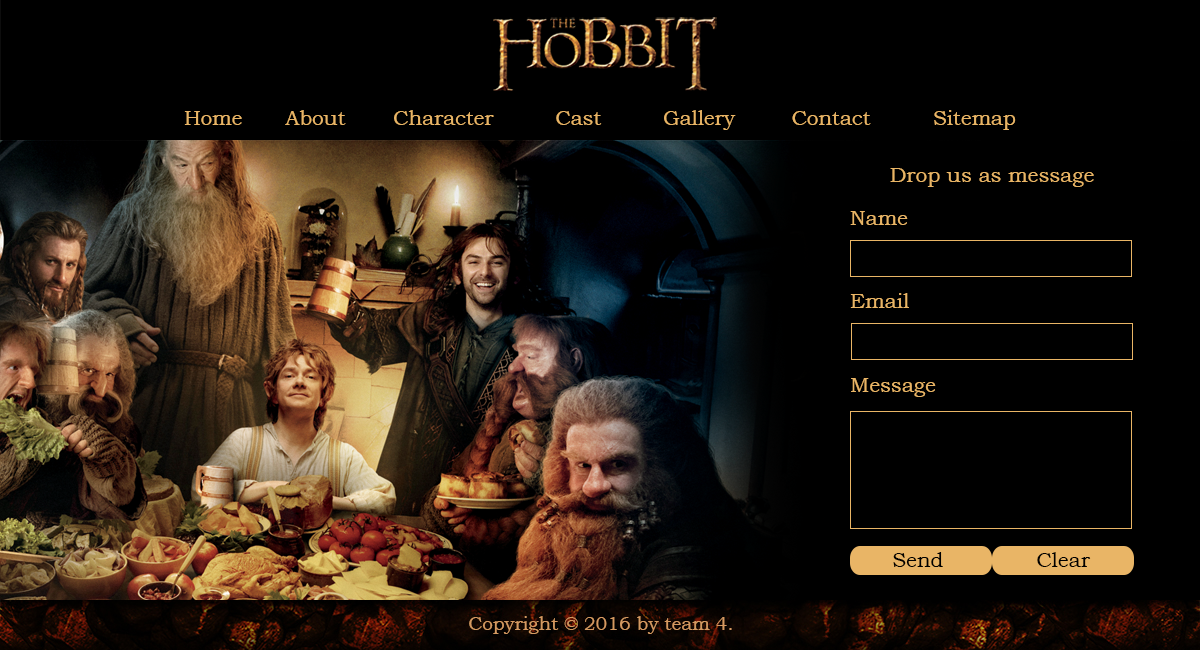
<style>
.page{position:relative;width:1200px;height:650px;background:#000000}
.page>*{position:absolute;margin:0}
.t1{font:20.6px "BookmanOldStyle";color:#e9b566}
.t2{font:20.8px "BookmanOldStyle";color:#e9b566}
.t3{font:20.8px/41.7px "BookmanOldStyle";color:#e9b566}
.t4{font:20.8px "BookmanOldStyle";color:#000000}
</style>
<div class="page">
<p class="t1" style="left:184px;top:110px;width:832px;height:20px">Home   About   Character   Cast   Gallery   Contact   Sitemap</p>
<p class="t2" style="left:890px;top:168px;width:204px;height:19px">Drop us as message</p>
<p class="t3" style="left:850px;top:211px;width:86px;height:186px">Name<br><br>Email<br><br>Message</p>
<p class="t4" style="left:893px;top:552px;width:198px;height:15px">Send            Clear</p>
</div>
